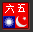
<style>
.page{position:relative;width:33px;height:32px;background:#f20000}
.page>*{position:absolute;margin:0}
.t1{font:10.4px "SimSun";color:#ffffff}
</style>
<div class="page">
<p class="t1" style="left:5px;top:4px;width:20px;height:9px">六五</p>
</div>
